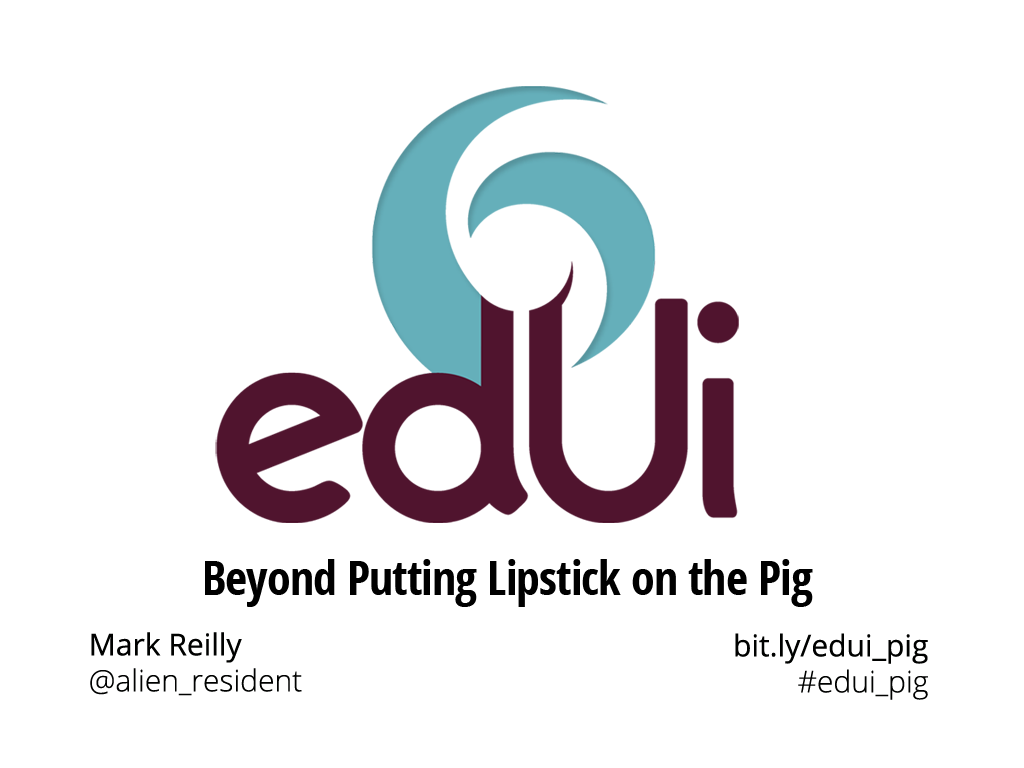
<style>
.page{position:relative;width:1024px;height:768px;background:#ffffff}
.page>*{position:absolute;margin:0}
.t1{font:48px "OpenSans-CondensedBold";letter-spacing:-0.02em;color:#000000}
.t2{font:30px "OpenSans-Light";color:#000100}
.t3{font:30px "OpenSans";color:#000100}
</style>
<div class="page">
<p class="t1" style="left:205px;top:559px;width:608px;height:48px">Beyond Putting Lipstick on the Pig</p>
<p class="t2" style="left:90px;top:632px;width:212px;height:64px"><span class="t3">Mark Reilly<br></span>@alien_resident</p>
<p class="t3" style="left:735px;top:633px;width:193px;height:67px;text-align:right">bit.ly/edui_pig<br><span class="t2">#edui_pig</span></p>
</div>
